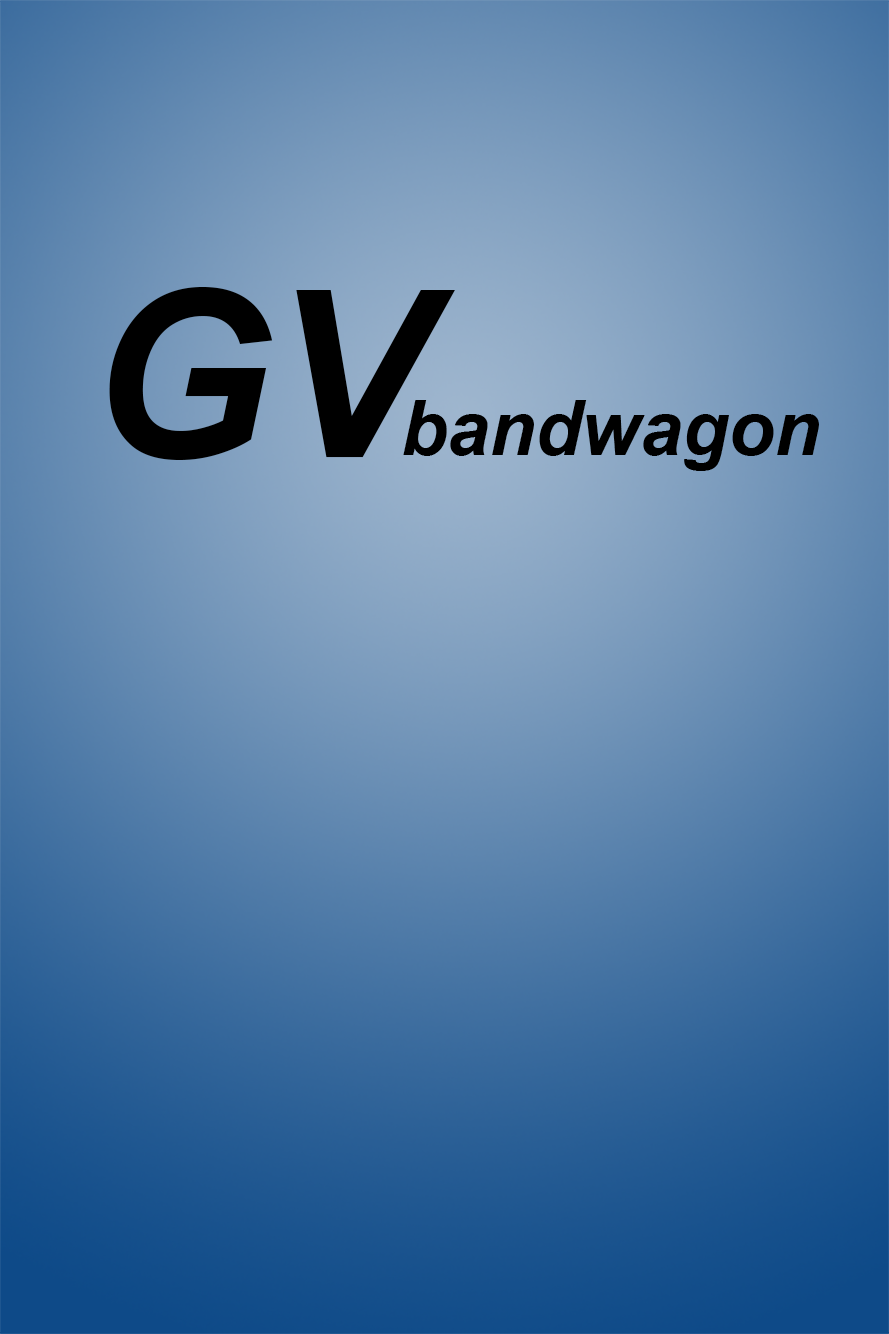
<style>
.page{position:relative;width:889px;height:1334px}
.page>*{position:absolute;margin:0}
.t1{font:232.9px "Arial-BoldItalicMT";color:#000000}
.t2{font:75.6px "Arial-BoldItalicMT";color:#000000}
</style>
<div class="page">
<p class="t1" style="left:109px;top:287px;width:346px;height:173px">GV</p>
<p class="t2" style="left:403px;top:400px;width:416px;height:71px">bandwagon</p>
</div>
